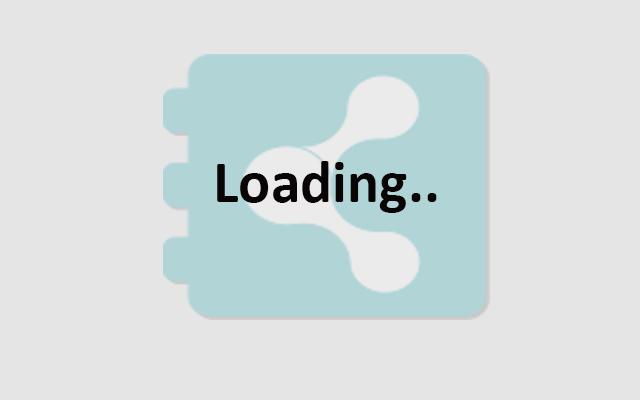
<style>
.page{position:relative;width:640px;height:400px;background:#e5e5e5}
.page>*{position:absolute;margin:0}
.t1{font:60px "Calibri-Bold";color:#0a0505}
</style>
<div class="page">
<p class="t1" style="left:217px;top:161px;width:220px;height:52px">Loading..</p>
</div>
